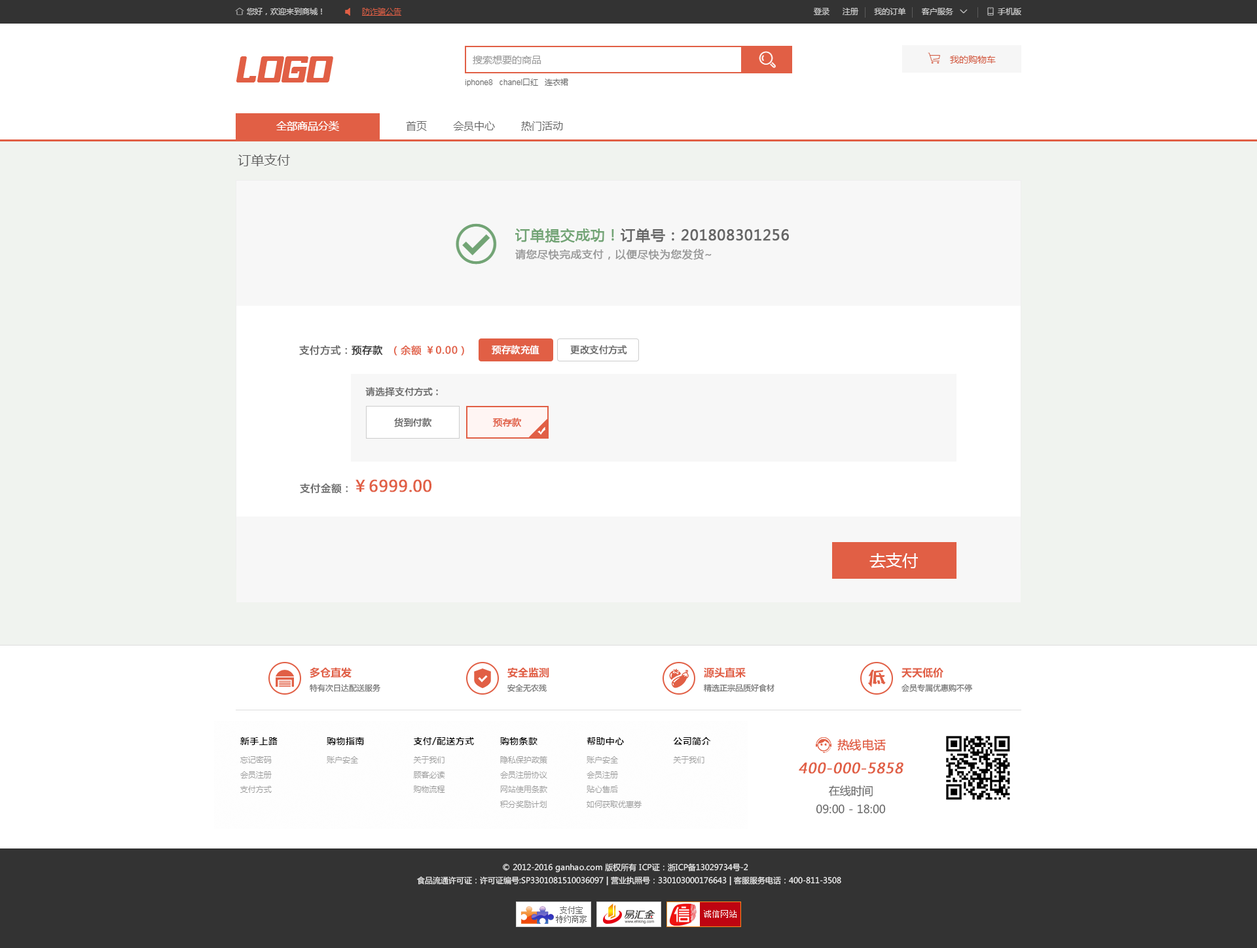
<style>
.page{position:relative;width:1257px;height:948px;background:#ffffff}
.page>*{position:absolute;margin:0}
.t1{font:13.1px "MicrosoftYaHei";color:#666666}
.t2{font:10.5px/17.7px "MicrosoftYaHei";color:#999999;font-weight:bold}
.t3{font:14.4px/17.7px "MicrosoftYaHei";color:#72a475;font-weight:bold}
.t4{font:14.4px/17.7px "MicrosoftYaHei";color:#666666;font-weight:bold}
.t5{font:9.8px "MicrosoftYaHei";color:#666666;font-weight:bold}
.t6{font:9.8px "MicrosoftYaHei";color:#333333;font-weight:bold}
.t7{font:9.8px "MicrosoftYaHei";color:#e15f45;font-weight:bold}
.t8{font:9.2px "MicrosoftYaHei";color:#ffffff;font-weight:bold}
.t9{font:9.2px "MicrosoftYaHei";color:#666666;font-weight:bold}
.t10{font:9.2px "MicrosoftYaHei";color:#e15f45;font-weight:bold}
.t11{font:15.7px "MicrosoftYaHei";color:#e15f45;font-weight:bold}
.t12{font:16.4px "MicrosoftYaHei";color:#ffffff}
.t13{font:10.5px "MicrosoftYaHei-Bold";color:#e15f45}
.t14{font:7.9px "MicrosoftYaHei";color:#666666}
.t15{font:11.8px "MicrosoftYaHei";color:#e15f45;font-weight:bold}
.t16{font:14.1px "MicrosoftYaHei";color:#e15f45;font-weight:bold;font-style:italic}
.t17{font:11.1px/18.2px "MicrosoftYaHei";color:#666666}
.t18{font:7.9px/13.1px "MicrosoftYaHei";color:#eeeeee}
</style>
<div class="page">
<p class="t1" style="left:238px;top:154px;width:52px;height:12px">订单支付</p>
<p class="t2" style="left:515px;top:229px;width:274px;height:31px"><span class="t3">订单提交成功！</span><span class="t4">订单号：201808301256<br></span>请您尽快完成支付，以便尽快为您发货~</p>
<p class="t5" style="left:299px;top:345px;width:84px;height:11px">支付方式：<span class="t6">预存款</span></p>
<p class="t7" style="left:394px;top:345px;width:70px;height:11px">（余额 ￥0.00）</p>
<p class="t8" style="left:492px;top:345px;width:48px;height:10px">预存款充值</p>
<p class="t9" style="left:570px;top:345px;width:57px;height:10px">更改支付方式</p>
<p class="t9" style="left:365px;top:387px;width:73px;height:10px">请选择支付方式：</p>
<p class="t9" style="left:394px;top:418px;width:38px;height:10px">货到付款</p>
<p class="t10" style="left:493px;top:418px;width:29px;height:9px">预存款</p>
<p class="t11" style="left:300px;top:479px;width:132px;height:15px"><span class="t5">支付金额：</span>￥6999.00</p>
<p class="t12" style="left:870px;top:553px;width:48px;height:15px">去支付</p>
<p class="t13" style="left:310px;top:667px;width:42px;height:11px">多仓直发</p>
<p class="t13" style="left:508px;top:667px;width:41px;height:11px">安全监测</p>
<p class="t13" style="left:704px;top:667px;width:42px;height:11px">源头直采</p>
<p class="t13" style="left:902px;top:667px;width:42px;height:11px">天天低价</p>
<p class="t14" style="left:310px;top:684px;width:71px;height:8px">特有次日达配送服务</p>
<p class="t14" style="left:508px;top:684px;width:39px;height:8px">安全无农残</p>
<p class="t14" style="left:704px;top:684px;width:71px;height:8px">精选正宗品质好食材</p>
<p class="t14" style="left:902px;top:684px;width:71px;height:8px">会员专属优惠购不停</p>
<p class="t15" style="left:838px;top:739px;width:48px;height:12px">热线电话</p>
<p class="t16" style="left:799px;top:762px;width:105px;height:12px">400-000-5858</p>
<p class="t17" style="left:816px;top:785px;width:70px;height:29px;text-align:center">在线时间<br>09:00 - 18:00</p>
<p class="t18" style="left:417px;top:863px;width:425px;height:23px;text-align:center">© 2012-2016 ganhao.com 版权所有 ICP证：浙ICP备13029734号-2   <br>食品流通许可证：许可证编号:SP3301081510036097 | 营业执照号：330103000176643 | 客服服务电话：400-811-3508</p>
</div>
